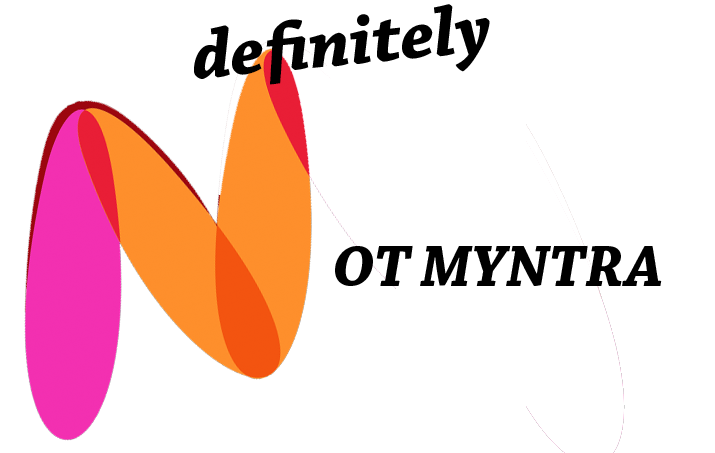
<style>
.page{position:relative;width:715px;height:453px;background:#ffffff}
.page>*{position:absolute;margin:0}
.t1{font:72px "ChaparralPro-BoldIt";color:#000000}
.t2{font:60px "ChaparralPro-BoldIt";color:#000000}
</style>
<div class="page">
<p class="t1" style="left:194px;top:4px;width:296px;height:81px;rotate:-6deg">definitely</p>
<p class="t2" style="left:335px;top:245px;width:327px;height:41px">OT MYNTRA</p>
</div>
